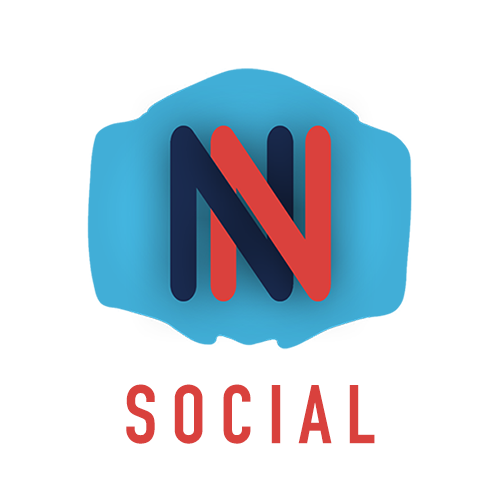
<style>
.page{position:relative;width:500px;height:500px;background:#ffffff}
.page>*{position:absolute;margin:0}
.t1{font:81.3px "DINCondensed-Bold";letter-spacing:0.18em;color:#d9413d}
</style>
<div class="page">
<p class="t1" style="left:126px;top:384px;width:249px;height:60px">SOCIAL</p>
</div>
